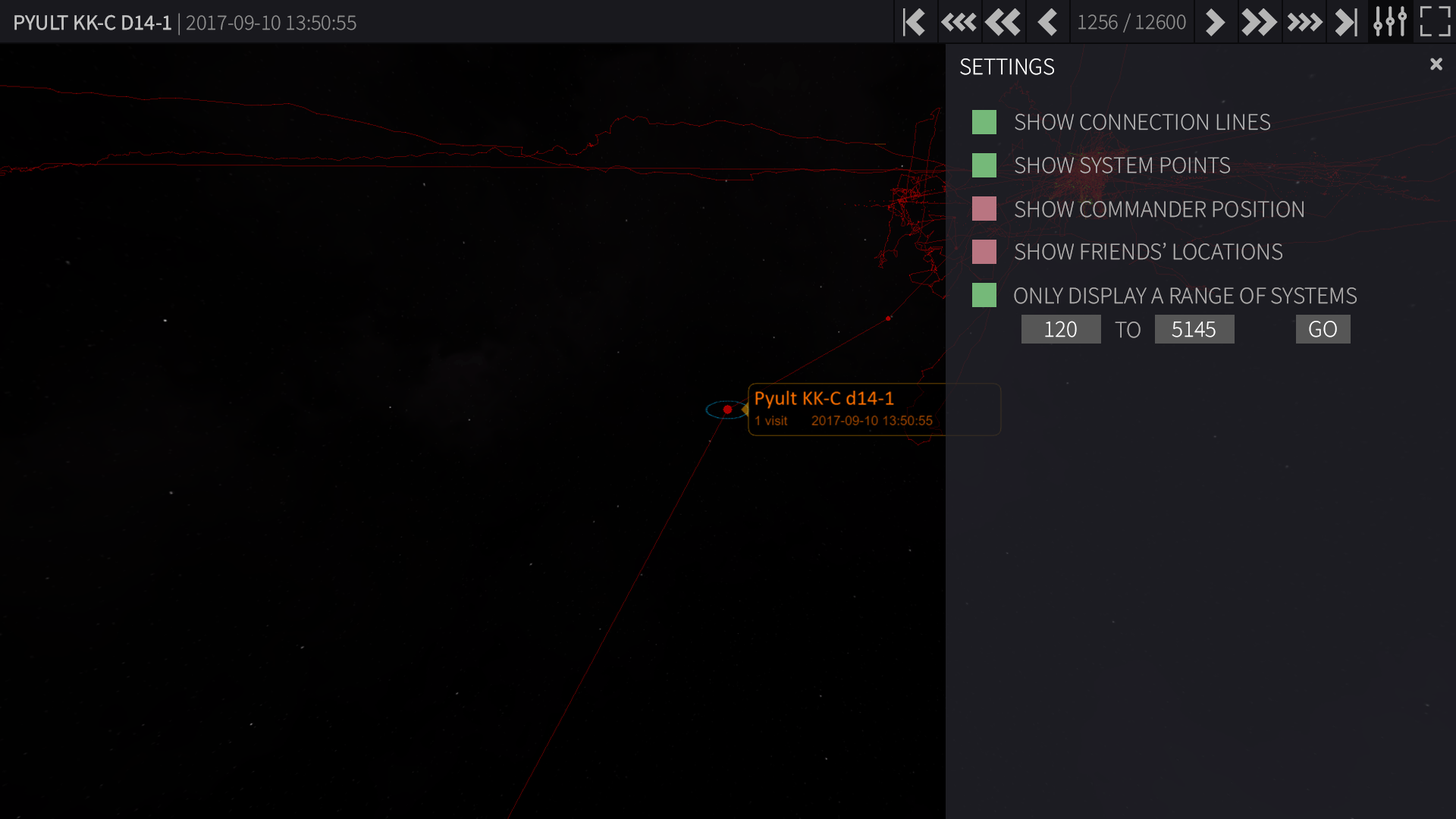
<style>
.page{position:relative;width:1456px;height:819px;background:#1c1c22}
.page>*{position:absolute;margin:0}
.t1{font:21.5px "SourceSansRoman-Light";color:#8e8e8e;font-weight:bold}
.t2{font:21.5px "SourceSansRoman-Regular";color:#c3c3c3;font-weight:bold}
.t3{font:23.5px "SourceSansRoman-Light";color:#ffffff;font-weight:bold}
.t4{font:23.5px "SourceSansRoman-Light";color:#b5b5b5;font-weight:bold}
.t5{font:23.5px "SourceSansRoman-Light";color:#adabab;font-weight:bold}
</style>
<div class="page">
<p class="t1" style="left:14px;top:13px;width:342px;height:23px"><span class="t2">PYULT KK-C D14-1</span> | 2017-09-10 13:50:55</p>
<p class="t1" style="left:1078px;top:13px;width:108px;height:20px">1256 / 12600</p>
<p class="t3" style="left:960px;top:58px;width:94px;height:17px">SETTINGS</p>
<p class="t4" style="left:1015px;top:114px;width:255px;height:16px">SHOW CONNECTION LINES</p>
<p class="t4" style="left:1015px;top:157px;width:215px;height:17px">SHOW SYSTEM POINTS</p>
<p class="t5" style="left:1015px;top:201px;width:289px;height:17px">SHOW COMMANDER POSITION</p>
<p class="t5" style="left:1015px;top:243px;width:267px;height:17px">SHOW FRIENDS’ LOCATIONS</p>
<p class="t5" style="left:1014px;top:287px;width:343px;height:17px">ONLY DISPLAY A RANGE OF SYSTEMS</p>
<p class="t3" style="left:1045px;top:321px;width:32px;height:16px">120</p>
<p class="t5" style="left:1115px;top:322px;width:26px;height:16px">TO</p>
<p class="t3" style="left:1172px;top:322px;width:44px;height:15px">5145</p>
<p class="t3" style="left:1309px;top:321px;width:28px;height:16px">GO</p>
</div>
